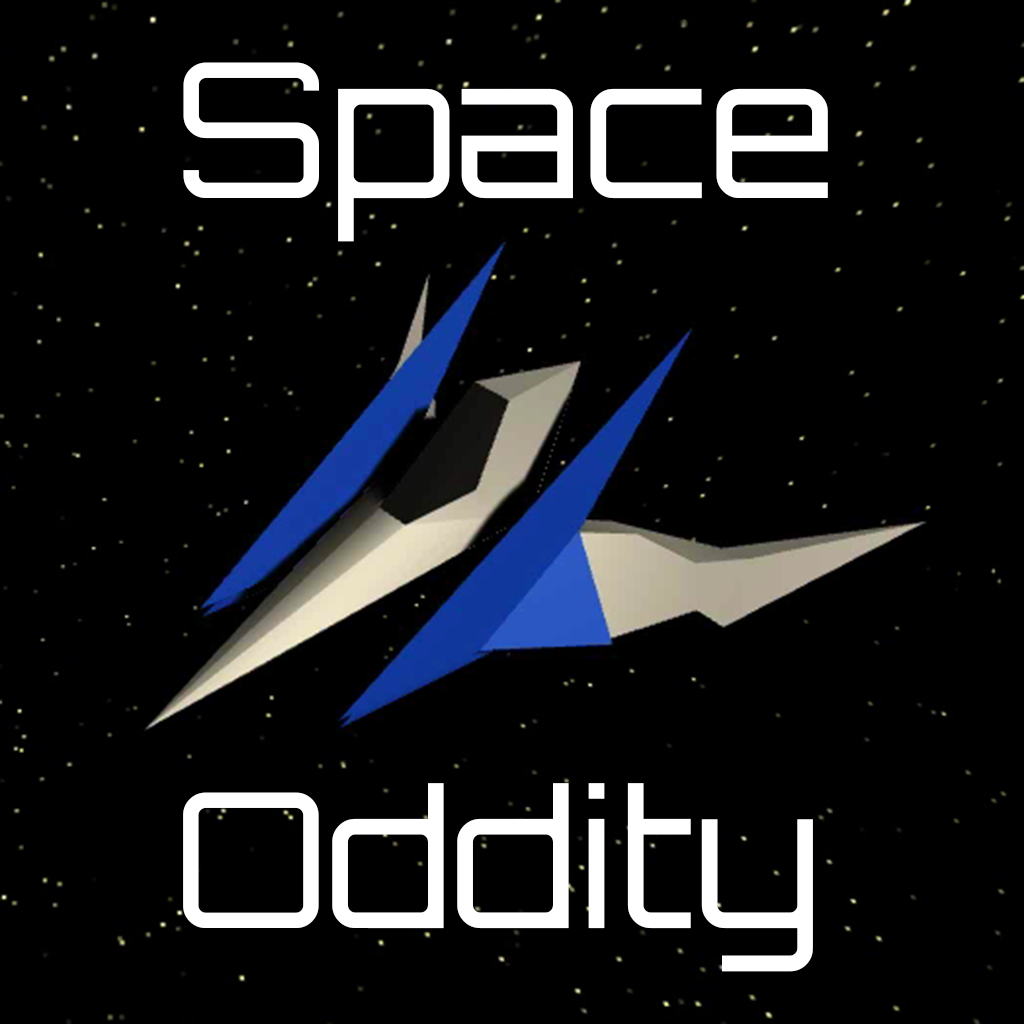
<style>
.page{position:relative;width:1024px;height:1024px;background:#000000}
.page>*{position:absolute;margin:0}
.t1{font:187.6px "Orbitron-Regular";color:#ffffff}
</style>
<div class="page">
<p class="t1" style="left:183px;top:62px;width:645px;height:180px">Space</p>
<p class="t1" style="left:183px;top:783px;width:630px;height:189px">Oddity</p>
</div>
